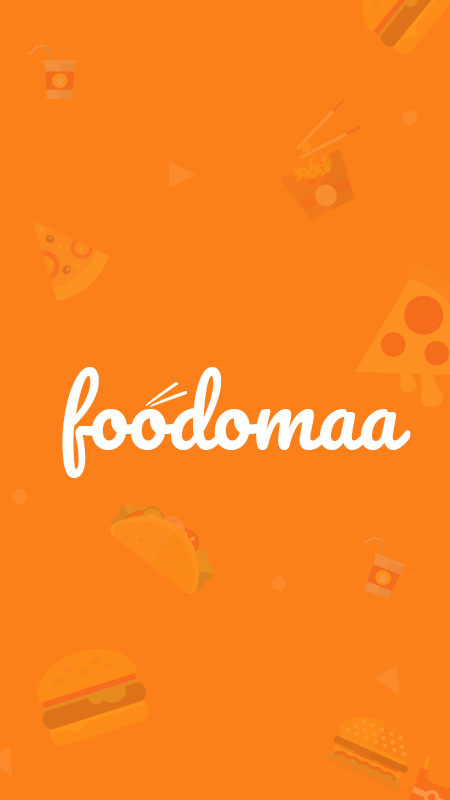
<style>
.page{position:relative;width:450px;height:800px;background:#fc8019}
.page>*{position:absolute;margin:0}
.t1{font:87.2px "Pacifico-Regular";color:#ffffff}
</style>
<div class="page">
<p class="t1" style="left:62px;top:367px;width:349px;height:111px">foodomaa</p>
</div>
